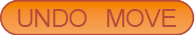
<style>
.page{position:relative;width:195px;height:35px}
.page>*{position:absolute;margin:0}
.t1{font:40.6px "Kartika";letter-spacing:-0.025em;color:#b64b3c}
</style>
<div class="page">
<p class="t1" style="left:18px;top:9px;width:158px;height:18px">UNDO MOVE</p>
</div>
